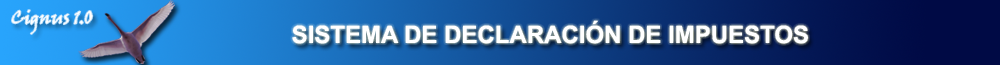
<style>
.page{position:relative;width:1000px;height:65px}
.page>*{position:absolute;margin:0}
.t1{font:18px "VinerHandITC";color:#ffffff}
.t2{font:24px "Arial-BoldMT";color:#ffffff}
</style>
<div class="page">
<p class="t1" style="left:12px;top:10px;width:81px;height:24px">Cignus 1.0</p>
<p class="t2" style="left:292px;top:20px;width:516px;height:24px">SISTEMA DE DECLARACIÓN DE IMPUESTOS</p>
</div>
